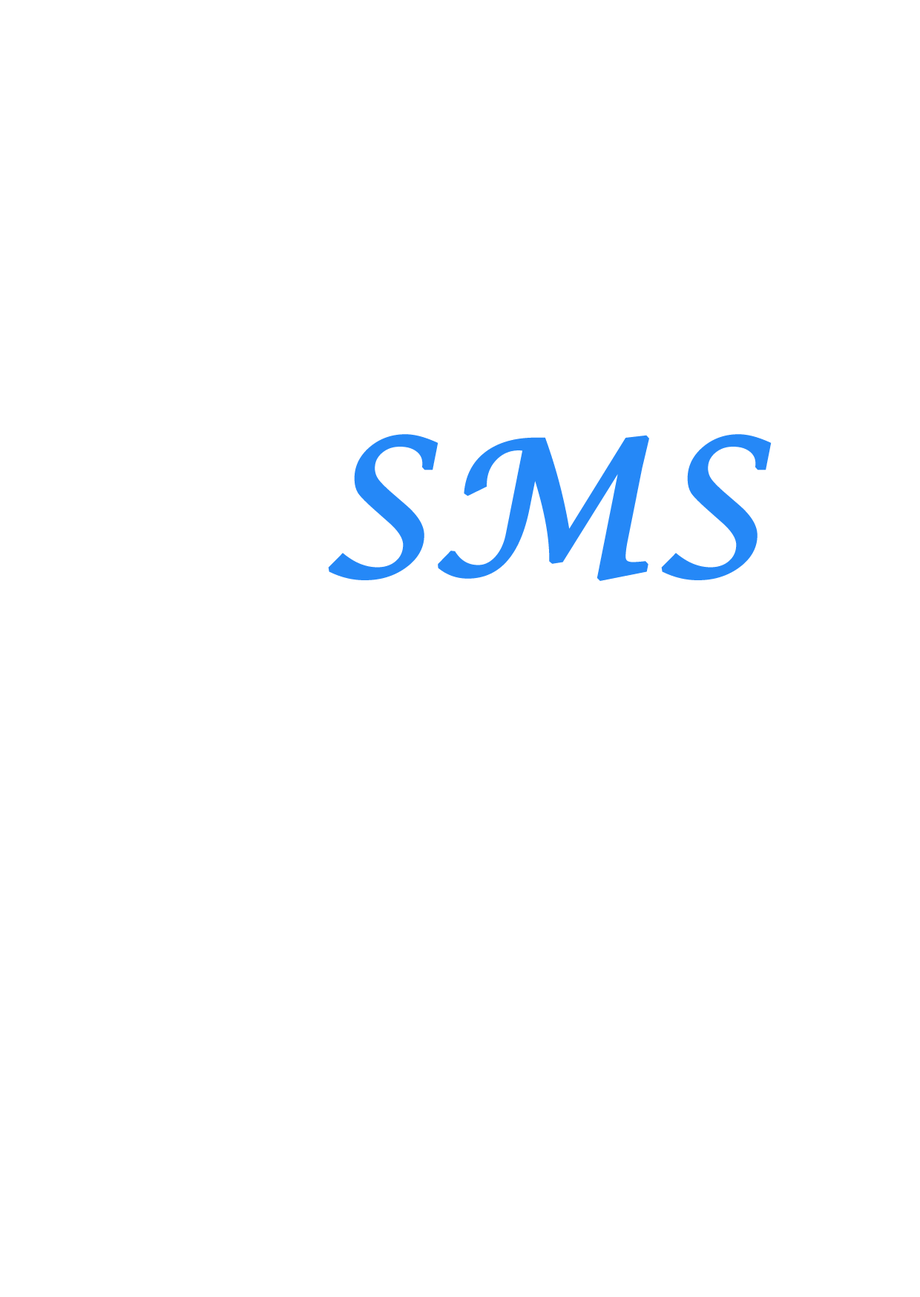
<style>
.page{position:relative;width:920px;height:1297px;background:#ffffff}
.page>*{position:absolute;margin:0}
.t1{font:185.4px "LucidaCalligraphy-Italic";color:#2588f7;font-weight:bold}
</style>
<div class="page">
<p class="t1" style="left:328px;top:434px;width:443px;height:147px">SMS</p>
</div>
